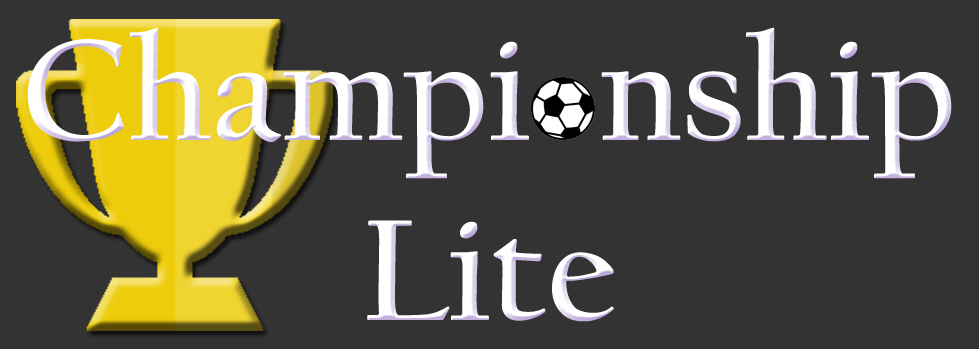
<style>
.page{position:relative;width:979px;height:349px;background:#333333}
.page>*{position:absolute;margin:0}
.t1{font:150px "CalifornianFB-Bold";color:#ffffff}
</style>
<div class="page">
<p class="t1" style="left:27px;top:27px;width:925px;height:295px;text-align:center">Champi  nship<br>Lite</p>
</div>
